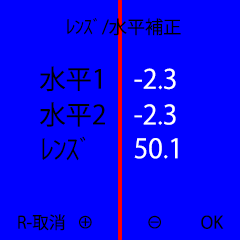
<style>
.page{position:relative;width:240px;height:240px;background:#0000ff}
.page>*{position:absolute;margin:0}
.t1{font:18px "KozGoPr6N-Regular";color:#000000}
.t2{font:26.2px "KozGoPr6N-Regular";color:#000000}
.t3{font:26.2px "KozGoPr6N-Regular";color:#ffffff}
.t4{font:16.9px "KozGoPr6N-Regular";color:#000000}
</style>
<div class="page">
<p class="t1" style="left:67px;top:18px;width:114px;height:18px">ﾚﾝｽﾞ/水平補正</p>
<p class="t2" style="left:40px;top:66px;width:61px;height:26px">水平1</p>
<p class="t3" style="left:134px;top:68px;width:42px;height:22px">-2.3</p>
<p class="t2" style="left:40px;top:102px;width:65px;height:25px">水平2</p>
<p class="t3" style="left:134px;top:104px;width:42px;height:21px">-2.3</p>
<p class="t2" style="left:42px;top:136px;width:44px;height:25px">ﾚﾝｽﾞ</p>
<p class="t3" style="left:134px;top:138px;width:44px;height:21px">50.1</p>
<p class="t4" style="left:18px;top:214px;width:47px;height:17px">R-取消</p>
<p class="t4" style="left:79px;top:215px;width:13px;height:14px">⊕</p>
<p class="t4" style="left:148px;top:215px;width:13px;height:14px">⊖</p>
<p class="t4" style="left:201px;top:215px;width:23px;height:14px">OK</p>
</div>
